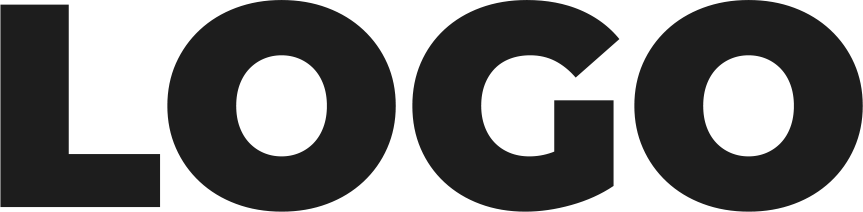
<style>
.page{position:relative;width:863px;height:212px;background:#1d1d1d}
.page>*{position:absolute;margin:0}
.t1{font:289px "Montserrat-Black";color:#1d1d1d}
</style>
<div class="page">
<p class="t1" style="left:0px;top:0px;width:863px;height:212px">LOGO</p>
</div>
